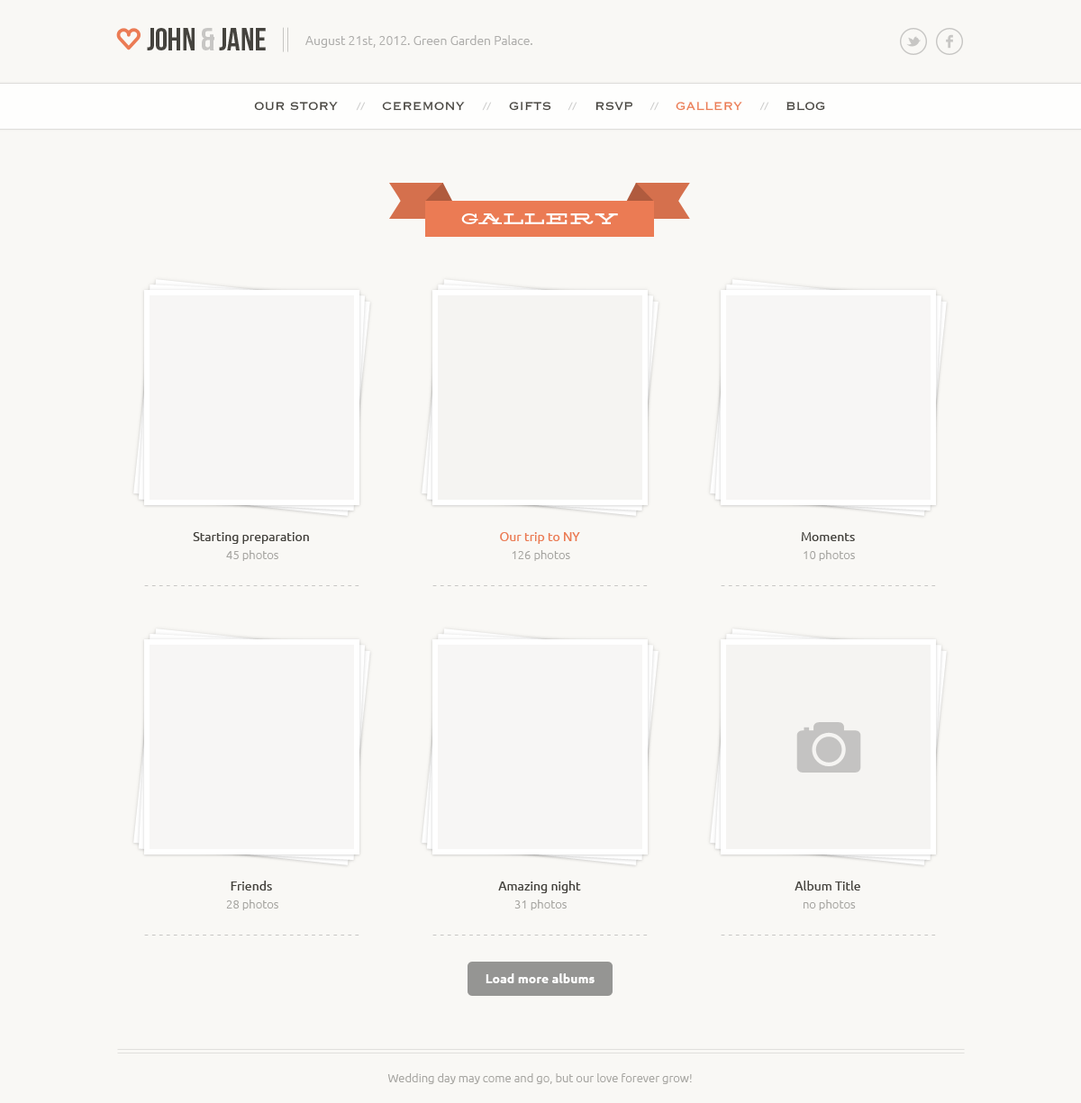
<style>
.page{position:relative;width:1081px;height:1103px;background:#f9f8f5}
.page>*{position:absolute;margin:0}
.t1{font:32.4px "BebasNeue";color:#45433e;text-transform:uppercase}
.t2{font:32.4px "BebasNeue";color:#c7c6c4;text-transform:uppercase}
.t3{font:12.6px "Ubuntu-Light";color:#aeadab}
.t4{font:14.4px "Copperplate-Light";color:#45433e;text-transform:uppercase}
.t5{font:14.4px "Copperplate-Light";color:#eb7b54;text-transform:uppercase}
.t6{font:21.6px "Silverfake";color:#ffffff;text-transform:uppercase}
.t7{font:12.6px "Ubuntu";color:#45433e}
.t8{font:12.6px "Ubuntu";color:#eb7b54}
.t9{font:11.7px "Ubuntu-Light";color:#a6a5a1}
.t10{font:11.7px "Actor-Regular";color:#c7c6c4}
.t11{font:12.6px "Ubuntu-Bold";color:#ffffff}
</style>
<div class="page">
<p class="t1" style="left:147px;top:28px;width:119px;height:22px">John <span class="t2">&amp;</span> Jane</p>
<p class="t3" style="left:305px;top:35px;width:227px;height:13px">August 21st, 2012. Green Garden Palace.</p>
<p class="t4" style="left:254px;top:102px;width:84px;height:9px">Our story</p>
<p class="t4" style="left:382px;top:102px;width:83px;height:9px">Ceremony</p>
<p class="t4" style="left:509px;top:102px;width:42px;height:9px">Gifts</p>
<p class="t4" style="left:595px;top:102px;width:37px;height:9px">RSVP</p>
<p class="t5" style="left:675px;top:102px;width:67px;height:9px">Gallery</p>
<p class="t4" style="left:786px;top:102px;width:39px;height:9px">Blog</p>
<p class="t6" style="left:461px;top:213px;width:157px;height:11px">Gallery</p>
<p class="t7" style="left:193px;top:532px;width:116px;height:12px">Starting preparation</p>
<p class="t8" style="left:500px;top:532px;width:80px;height:12px">Our trip to NY</p>
<p class="t7" style="left:801px;top:532px;width:54px;height:9px">Moments</p>
<p class="t9" style="left:226px;top:550px;width:52px;height:11px">45 photos</p>
<p class="t9" style="left:512px;top:550px;width:58px;height:11px">126 photos</p>
<p class="t9" style="left:803px;top:550px;width:52px;height:11px">10 photos</p>
<p class="t10" style="left:144px;top:585px;width:215px;height:1px">- - - - - - - - - - - - - - - - - - - - - - - - - - - - - -</p>
<p class="t10" style="left:432px;top:585px;width:216px;height:1px">- - - - - - - - - - - - - - - - - - - - - - - - - - - - - -</p>
<p class="t10" style="left:721px;top:585px;width:215px;height:1px">- - - - - - - - - - - - - - - - - - - - - - - - - - - - - -</p>
<p class="t7" style="left:231px;top:881px;width:41px;height:10px">Friends</p>
<p class="t7" style="left:498px;top:881px;width:83px;height:12px">Amazing night</p>
<p class="t7" style="left:794px;top:881px;width:66px;height:10px">Album Title</p>
<p class="t9" style="left:226px;top:900px;width:52px;height:11px">28 photos</p>
<p class="t9" style="left:514px;top:900px;width:53px;height:11px">31 photos</p>
<p class="t9" style="left:803px;top:900px;width:53px;height:11px">no photos</p>
<p class="t10" style="left:144px;top:935px;width:215px;height:1px">- - - - - - - - - - - - - - - - - - - - - - - - - - - - - -</p>
<p class="t10" style="left:432px;top:935px;width:216px;height:1px">- - - - - - - - - - - - - - - - - - - - - - - - - - - - - -</p>
<p class="t10" style="left:721px;top:935px;width:215px;height:1px">- - - - - - - - - - - - - - - - - - - - - - - - - - - - - -</p>
<p class="t11" style="left:485px;top:974px;width:109px;height:10px">Load more albums</p>
<p class="t9" style="left:387px;top:1074px;width:305px;height:10px">Wedding day may come and go, but our love forever grow!</p>
</div>
